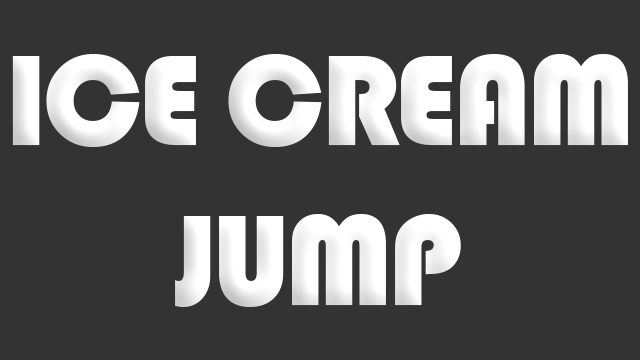
<style>
.page{position:relative;width:640px;height:360px;background:#333333}
.page>*{position:absolute;margin:0}
.t1{font:133.3px "Bauhaus93";letter-spacing:-0.04em;color:#ffffff}
</style>
<div class="page">
<p class="t1" style="left:12px;top:54px;width:616px;height:253px;text-align:center">ICE CREAM<br>JUMP</p>
</div>
